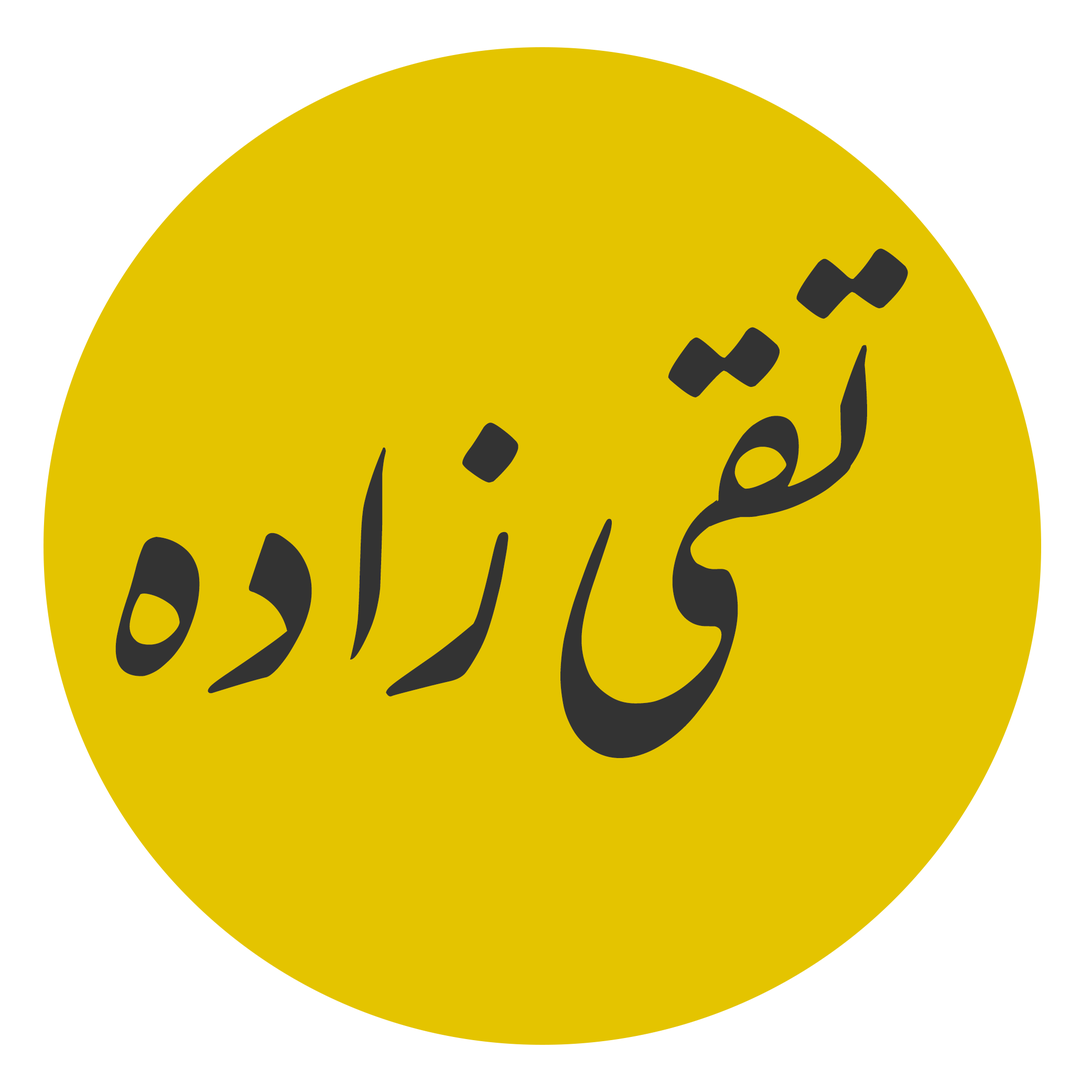
<style>
.page{position:relative;width:1092px;height:1092px;background:#e4c400}
.page>*{position:absolute;margin:0}
.t1{font:388.4px "MehrNastaliqWeb";color:#333333}
</style>
<div class="page">
<p class="t1" style="left:115px;top:248px;width:793px;height:510px">تقی زاده</p>
</div>
